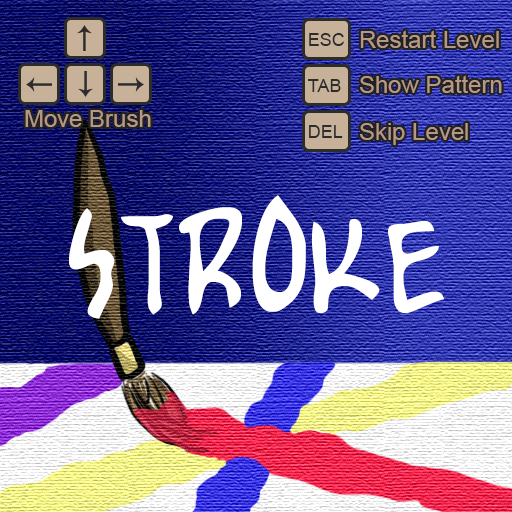
<style>
.page{position:relative;width:512px;height:512px}
.page>*{position:absolute;margin:0}
.t1{font:24px "ArialMT";color:#b89885}
.t2{font:18px "ArialMT";color:#2c2c2c}
</style>
<div class="page">
<p class="t1" style="left:360px;top:30px;width:139px;height:18px">Restart Level</p>
<p class="t2" style="left:309px;top:33px;width:35px;height:13px">ESC</p>
<p class="t1" style="left:360px;top:75px;width:142px;height:18px">Show Pattern</p>
<p class="t2" style="left:308px;top:79px;width:33px;height:13px">TAB</p>
<p class="t1" style="left:25px;top:110px;width:126px;height:17px">Move Brush</p>
<p class="t2" style="left:309px;top:125px;width:34px;height:13px">DEL</p>
<p class="t1" style="left:360px;top:123px;width:108px;height:22px">Skip Level</p>
</div>
